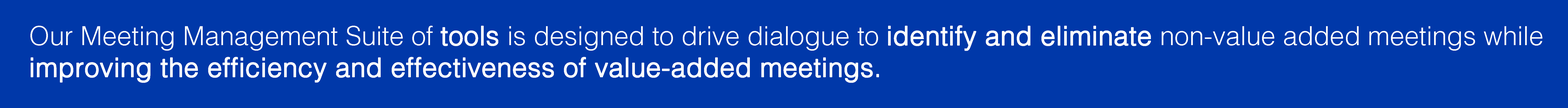
<style>
.page{position:relative;width:1568px;height:108px;background:#0038a9}
.page>*{position:absolute;margin:0}
.t1{font:26.4px "Helvetica-Light";color:#fffdfd;font-weight:bold}
.t2{font:26.4px "Helvetica-Light";color:#fffdfd}
</style>
<div class="page">
<p class="t1" style="left:30px;top:25px;width:1512px;height:58px"><span class="t2">Our Meeting Management Suite of </span>tools<span class="t2"> is designed to drive dialogue to </span>identify and eliminate<span class="t2"> non-value added meetings while <br></span>improving the efficiency and effectiveness of value-added meetings.</p>
</div>
